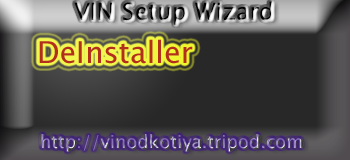
<style>
.page{position:relative;width:350px;height:160px;background:#282828}
.page>*{position:absolute;margin:0}
.t1{font:24px "LucidaSansUnicode"}
.t2{font:30px "LucidaSansUnicode";color:#b32f1d}
.t3{font:18px "LucidaSansUnicode"}
</style>
<div class="page">
<p class="t1" style="left:74px;top:1px;width:198px;height:24px">VIN Setup Wizard</p>
<p class="t2" style="left:39px;top:39px;width:154px;height:25px">DeInstaller</p>
<p class="t3" style="left:41px;top:134px;width:261px;height:18px">http://vinodkotiya.tripod.com</p>
</div>
